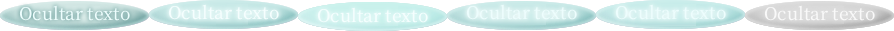
<style>
.page{position:relative;width:894px;height:31px;background:#ffffff}
.page>*{position:absolute;margin:0}
.t1{font:21px "OfficialFateFont-Medium";color:#edfdfd}
.t2{font:21px "OfficialFateFont-Medium";color:#f5fefe}
.t3{font:21px "OfficialFateFont-Medium";color:#f9f9f9}
</style>
<div class="page">
<p class="t1" style="left:19px;top:5px;width:111px;height:16px">Ocultar texto</p>
<p class="t2" style="left:168px;top:4px;width:111px;height:16px">Ocultar texto</p>
<p class="t1" style="left:466px;top:4px;width:111px;height:16px">Ocultar texto</p>
<p class="t1" style="left:615px;top:4px;width:111px;height:16px">Ocultar texto</p>
<p class="t3" style="left:764px;top:5px;width:111px;height:16px">Ocultar texto</p>
<p class="t2" style="left:317px;top:7px;width:111px;height:16px">Ocultar texto</p>
</div>
